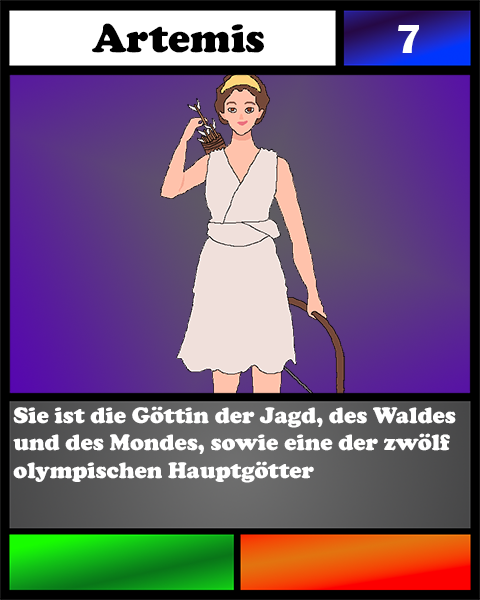
<style>
.page{position:relative;width:480px;height:600px}
.page>*{position:absolute;margin:0}
.t1{font:41.7px "Bauhaus93";color:#42667c}
.t2{font:41.7px "CooperBlack";color:#000000}
.t3{font:41.7px "BritannicBold";color:#ffffff}
.t4{font:23.1px "CooperBlack";color:#ffffff}
</style>
<div class="page">
<p class="t1" style="left:92px;top:23px;width:172px;height:30px;text-align:center"><span class="t2">Artemis<br></span><br><br>dwadwawda</p>
<p class="t3" style="left:398px;top:25px;width:21px;height:28px">7</p>
<p class="t4" style="left:13px;top:406px;width:443px;height:77px">Sie ist die Göttin der Jagd, des Waldes und des Mondes, sowie eine der zwölf olympischen Hauptgötter</p>
</div>
